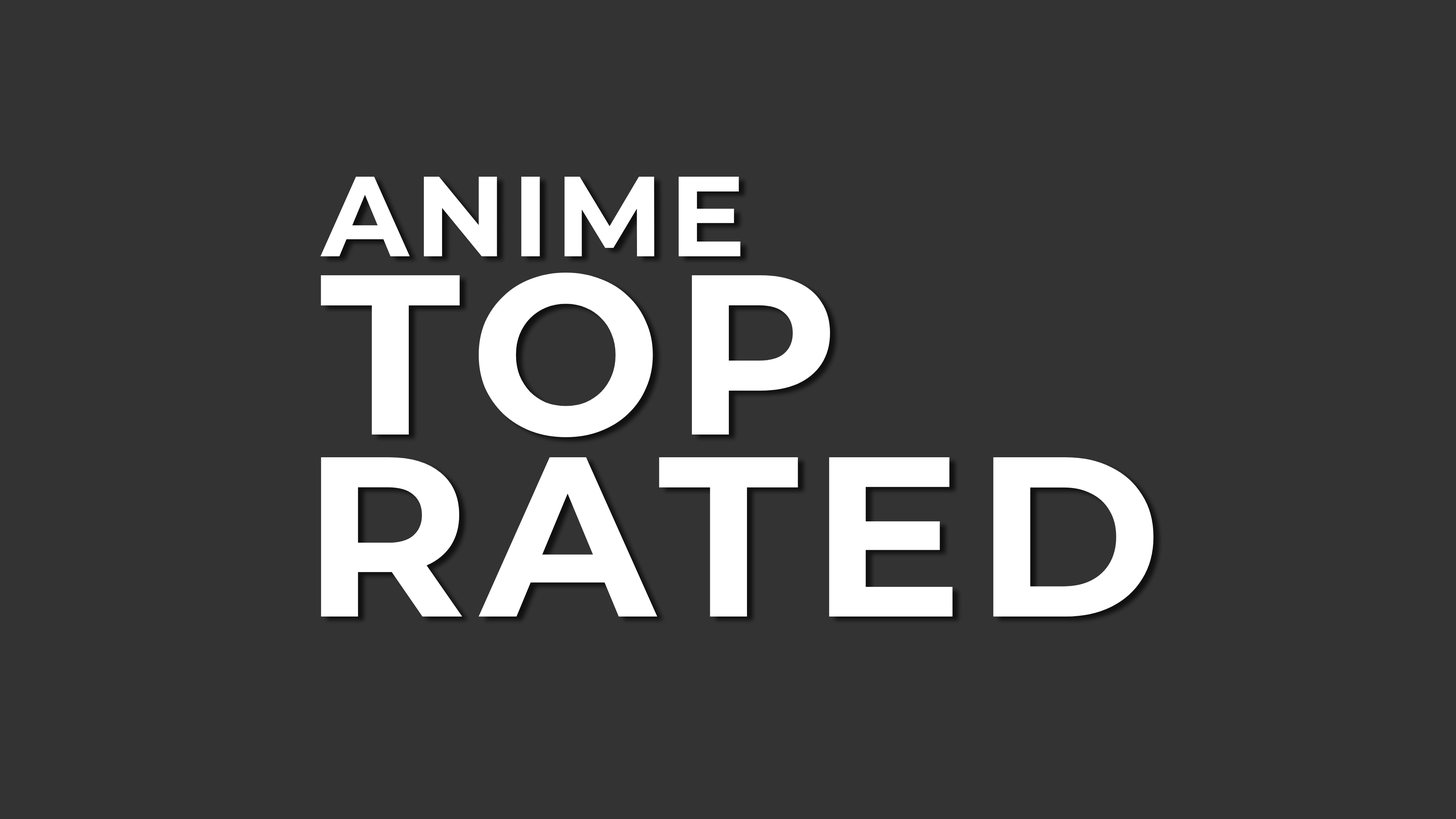
<style>
.page{position:relative;width:1456px;height:819px;background:#333333}
.page>*{position:absolute;margin:0}
.t1{font:113.7px "Montserrat-Bold";letter-spacing:0.05em;color:#ffffff}
.t2{font:227.5px "Montserrat-Bold";letter-spacing:0.05em;color:#ffffff}
</style>
<div class="page">
<p class="t1" style="left:320px;top:177px;width:421px;height:79px">ANIME</p>
<p class="t2" style="left:321px;top:272px;width:509px;height:166px">TOP</p>
<p class="t2" style="left:321px;top:457px;width:833px;height:160px">RATED</p>
</div>
